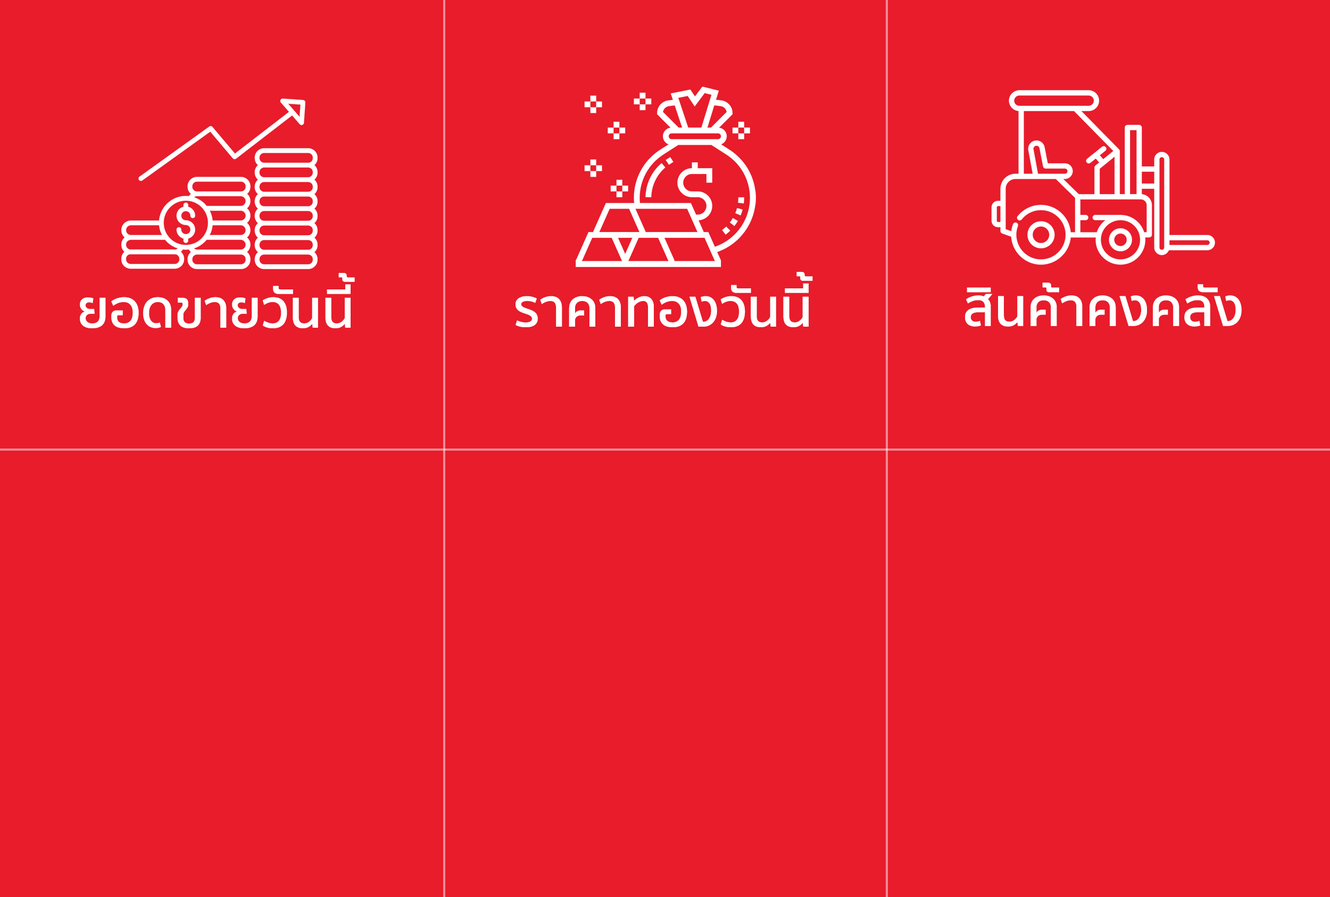
<style>
.page{position:relative;width:1330px;height:897px;background:#e81c2b}
.page>*{position:absolute;margin:0}
.t1{font:53.2px "SukhumvitSet-SemiBold";color:#fefefe}
</style>
<div class="page">
<p class="t1" style="left:80px;top:273px;width:275px;height:55px">ยอดขายวันนี้</p>
<p class="t1" style="left:515px;top:272px;width:298px;height:55px">ราคาทองวันนี้</p>
<p class="t1" style="left:965px;top:282px;width:276px;height:45px">สินค้าคงคลัง</p>
</div>
